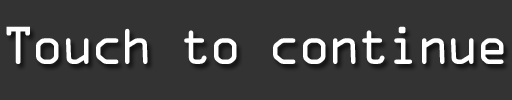
<style>
.page{position:relative;width:512px;height:100px;background:#333333}
.page>*{position:absolute;margin:0}
.t1{font:47.8px "OCRAStd";letter-spacing:-0.1em;color:#ffffff}
</style>
<div class="page">
<p class="t1" style="left:6px;top:26px;width:498px;height:38px">Touch to continue</p>
</div>
